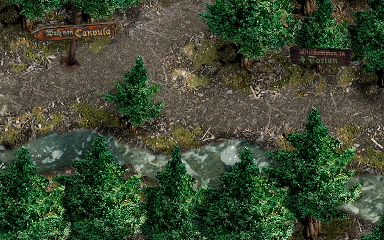
<style>
.page{position:relative;width:384px;height:240px}
.page>*{position:absolute;margin:0}
.t1{font:6.6px "DucDeBerry";letter-spacing:0.04em;color:#aeb696}
.t2{font:7px "DucDeBerry";letter-spacing:0.04em}
.t3{font:10px "DucDeBerry";letter-spacing:0.06em;color:#c9bc74}
.t4{font:7px "DucDeBerry";letter-spacing:0.06em;color:#886954}
.t5{font:9px "DucDeBerry";letter-spacing:0.06em;color:#61824f;scale:1.12 1}
</style>
<div class="page">
<p class="t1" style="left:45px;top:29px;width:17px;height:7px;rotate:-4deg">Wald</p>
<p class="t2" style="left:62px;top:30px;width:12px;height:5px;rotate:-3deg">von</p>
<p class="t3" style="left:75px;top:27px;width:36px;height:10px;rotate:-4deg">Canvula</p>
<p class="t4" style="left:299px;top:48px;width:46px;height:8px;rotate:3deg">Willkommen in</p>
<p class="t5" style="left:308px;top:56px;width:30px;height:8px">Torian</p>
</div>
